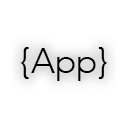
<style>
.page{position:relative;width:128px;height:128px;background:#ffffff}
.page>*{position:absolute;margin:0}
.t1{font:34.6px "Avenir-Light";color:#000000}
</style>
<div class="page">
<p class="t1" style="left:21px;top:47px;width:86px;height:34px">{App}</p>
</div>
